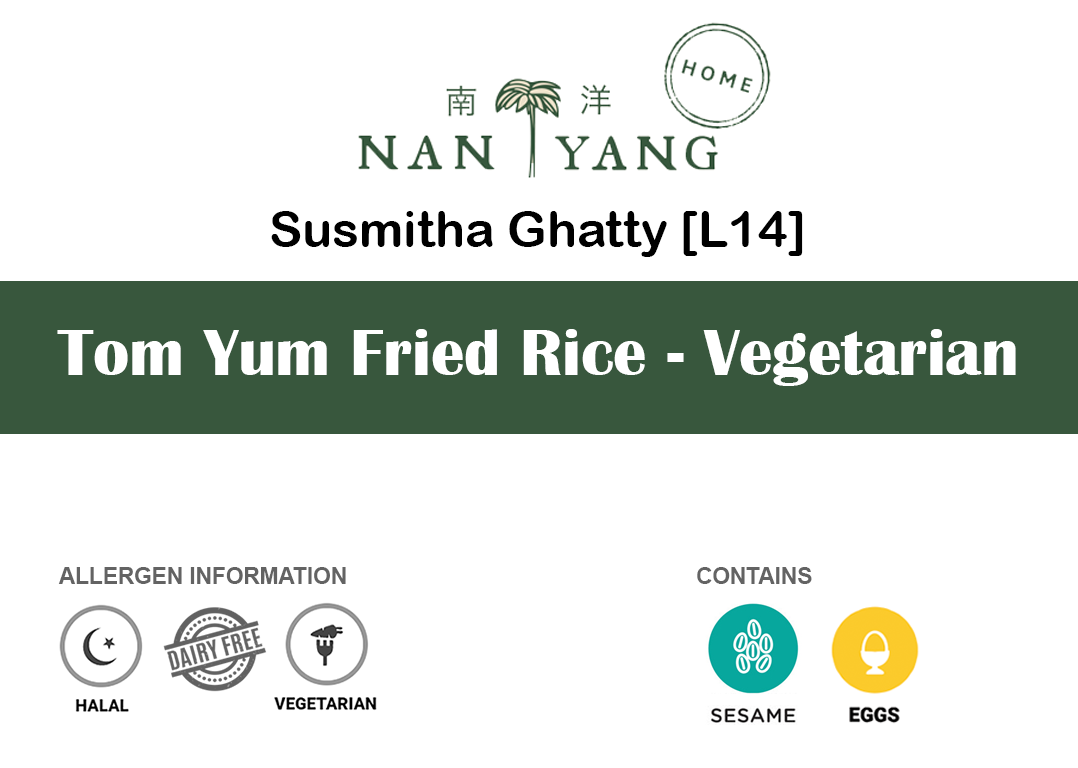
<style>
.page{position:relative;width:1078px;height:768px;background:#ffffff}
.page>*{position:absolute;margin:0}
.t1{font:50px "ArialRoundedMTBold";color:#000000}
.t2{font:66.7px "BritannicBold";color:#ffffff}
.t3{font:22.6px "Arial-BoldMT";color:#636363}
</style>
<div class="page">
<p class="t1" style="left:271px;top:211px;width:532px;height:46px">Susmitha Ghatty [L14]</p>
<p class="t2" style="left:57px;top:329px;width:959px;height:57px">Tom Yum Fried Rice - Vegetarian</p>
<p class="t3" style="left:58px;top:567px;width:288px;height:17px">ALLERGEN INFORMATION</p>
<p class="t3" style="left:697px;top:567px;width:115px;height:17px">CONTAINS</p>
</div>
